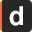
<style>
.page{position:relative;width:32px;height:32px;background:#272727}
.page>*{position:absolute;margin:0}
.t1{font:26px "Helvetica-Bold";color:#ffffff}
</style>
<div class="page">
<p class="t1" style="left:9px;top:6px;width:14px;height:20px">d</p>
</div>
